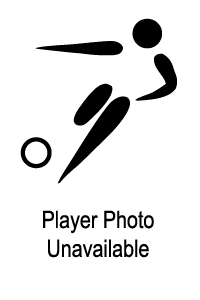
<style>
.page{position:relative;width:200px;height:300px;background:#ffffff}
.page>*{position:absolute;margin:0}
.t1{font:24px "ArialNarrow";color:#000000}
</style>
<div class="page">
<p class="t1" style="left:43px;top:210px;width:111px;height:48px;text-align:center">Player Photo<br>Unavailable</p>
</div>
